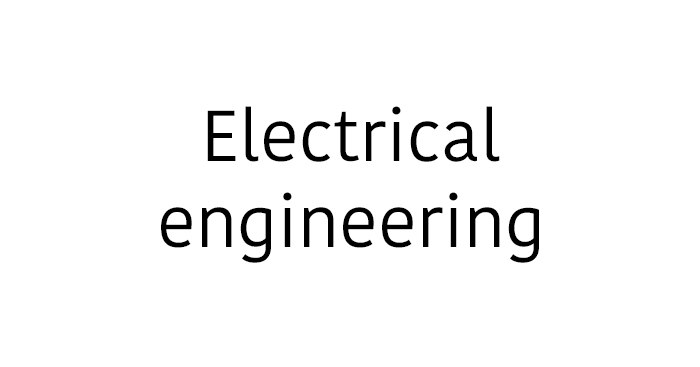
<style>
.page{position:relative;width:700px;height:367px;background:#ffffff}
.page>*{position:absolute;margin:0}
.t1{font:71.8px "KohinoorBangla-Regular";color:#000000}
</style>
<div class="page">
<p class="t1" style="left:161px;top:106px;width:378px;height:157px;text-align:center">Electrical<br>engineering</p>
</div>
